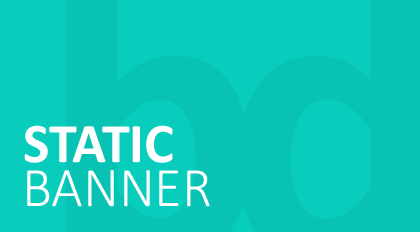
<style>
.page{position:relative;width:420px;height:232px;background:#08c3b3}
.page>*{position:absolute;margin:0}
.t1{font:56.2px "Calibri-Bold";color:#ffffff}
.t2{font:56.2px "Calibri-Light";color:#ffffff}
</style>
<div class="page">
<p class="t1" style="left:24px;top:125px;width:149px;height:38px">STATIC</p>
<p class="t2" style="left:27px;top:170px;width:183px;height:37px">BANNER</p>
</div>
